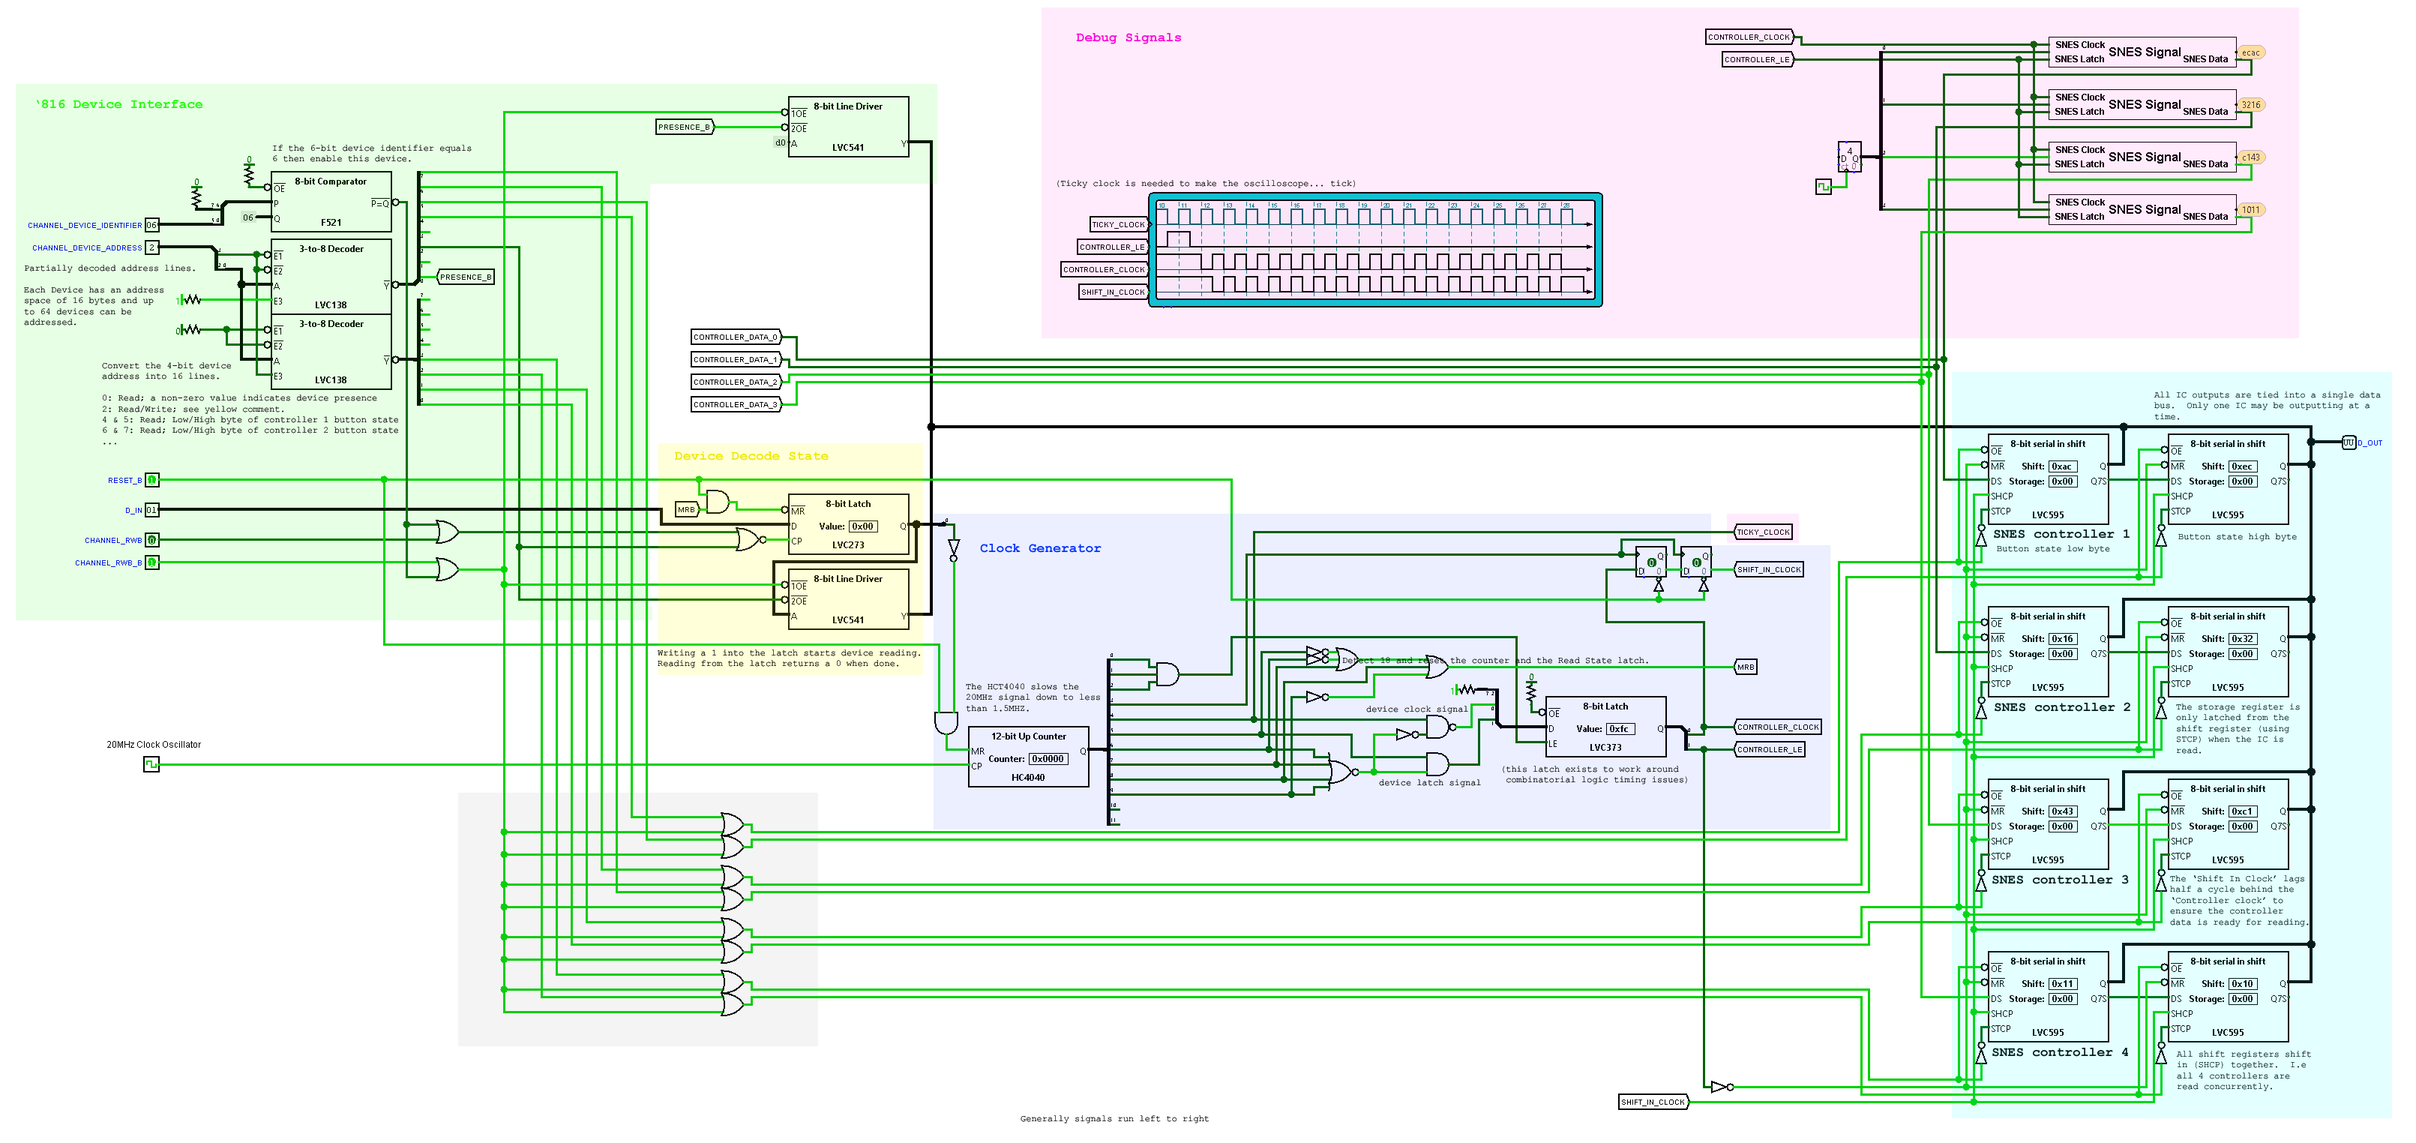
<style>
.page{position:relative;width:2416px;height:1143px;background:#ffffff}
.page>*{position:absolute;margin:0}
.t1{font:13.5px "CourierNewPS-BoldMT";color:#ff00de}
.t2{font:13.5px "CourierNewPS-BoldMT";color:#18ff00}
.t3{font:9px "CourierNewPSMT";color:#000000}
.t4{font:9px "CourierNewPSMT";color:#001c1c}
.t5{font:13.5px "CourierNewPS-BoldMT";color:#edea02}
.t6{font:13.5px "CourierNewPS-BoldMT";color:#001c1c}
.t7{font:13.5px "CourierNewPS-BoldMT";color:#0030ff}
.t8{font:9px "CourierNewPSMT"}
</style>
<div class="page">
<p class="t1" style="left:1076px;top:33px;width:105px;height:11px">Debug Signals</p>
<p class="t2" style="left:36px;top:99px;width:166px;height:10px">‘816 Device Interface</p>
<p class="t3" style="left:273px;top:145px;width:199px;height:17px">If the 6-bit device identifier equals <br>6 then enable this device.</p>
<p class="t3" style="left:1058px;top:180px;width:297px;height:8px">(Ticky clock is needed to make the oscilloscope... tick)</p>
<p class="t3" style="left:24px;top:265px;width:171px;height:61px">Partially decoded address lines.<br><br>Each Device has an address<br>space of 16 bytes and up<br>to 64 devices can be <br>addressed.</p>
<p class="t3" style="left:102px;top:362px;width:296px;height:83px">Convert the 4-bit device <br>address into 16 lines.<br><br>0: Read; a non-zero value indicates device presence<br>2: Read/Write; see yellow comment.<br>4 &amp; 5: Read; Low/High byte of controller 1 button state<br>6 &amp; 7: Read; Low/High byte of controller 2 button state<br>...</p>
<p class="t4" style="left:2154px;top:392px;width:227px;height:28px">All IC outputs are tied into a single data<br>bus.  Only one IC may be outputting at a<br>time.</p>
<p class="t5" style="left:675px;top:452px;width:154px;height:8px">Device Decode State</p>
<p class="t6" style="left:1994px;top:529px;width:136px;height:9px">SNES controller 1</p>
<p class="t4" style="left:2179px;top:533px;width:118px;height:9px">Button state high byte</p>
<p class="t7" style="left:980px;top:544px;width:122px;height:9px">Clock Generator</p>
<p class="t8" style="left:1997px;top:545px;width:113px;height:9px">Button state low byte</p>
<p class="t3" style="left:658px;top:650px;width:262px;height:18px">Writing a 1 into the latch starts device reading.<br>Reading from the latch returns a 0 when done.</p>
<p class="t3" style="left:1342px;top:657px;width:306px;height:7px">Detect 18 and reset the counter and the Read State latch.</p>
<p class="t3" style="left:966px;top:683px;width:134px;height:29px">The HCT4040 slows the<br>20MHz signal down to less<br>than 1.5MHZ.</p>
<p class="t6" style="left:1995px;top:702px;width:136px;height:10px">SNES controller 2</p>
<p class="t3" style="left:1366px;top:706px;width:102px;height:8px">device clock signal</p>
<p class="t4" style="left:2176px;top:704px;width:124px;height:50px">The storage register is<br>only latched from the<br>shift register (using<br>STCP) when the IC is<br>read.</p>
<p class="t3" style="left:1503px;top:766px;width:185px;height:18px">(this latch exists to work around<br> combinatorial logic timing issues)</p>
<p class="t3" style="left:1379px;top:779px;width:102px;height:9px">device latch signal</p>
<p class="t6" style="left:1993px;top:874px;width:136px;height:10px">SNES controller 3</p>
<p class="t4" style="left:2170px;top:875px;width:139px;height:52px">The ‘Shift In Clock’ lags<br>half a cycle behind the<br>‘Controller clock’ to<br>ensure the controller<br>data is ready for reading.</p>
<p class="t6" style="left:1993px;top:1048px;width:135px;height:9px">SNES controller 4</p>
<p class="t4" style="left:2176px;top:1051px;width:136px;height:40px">All shift registers shift<br>in (SHCP) together.  I.e<br>all 4 controllers are<br>read concurrently.</p>
<p class="t3" style="left:1021px;top:1115px;width:188px;height:9px">Generally signals run left to right</p>
</div>
